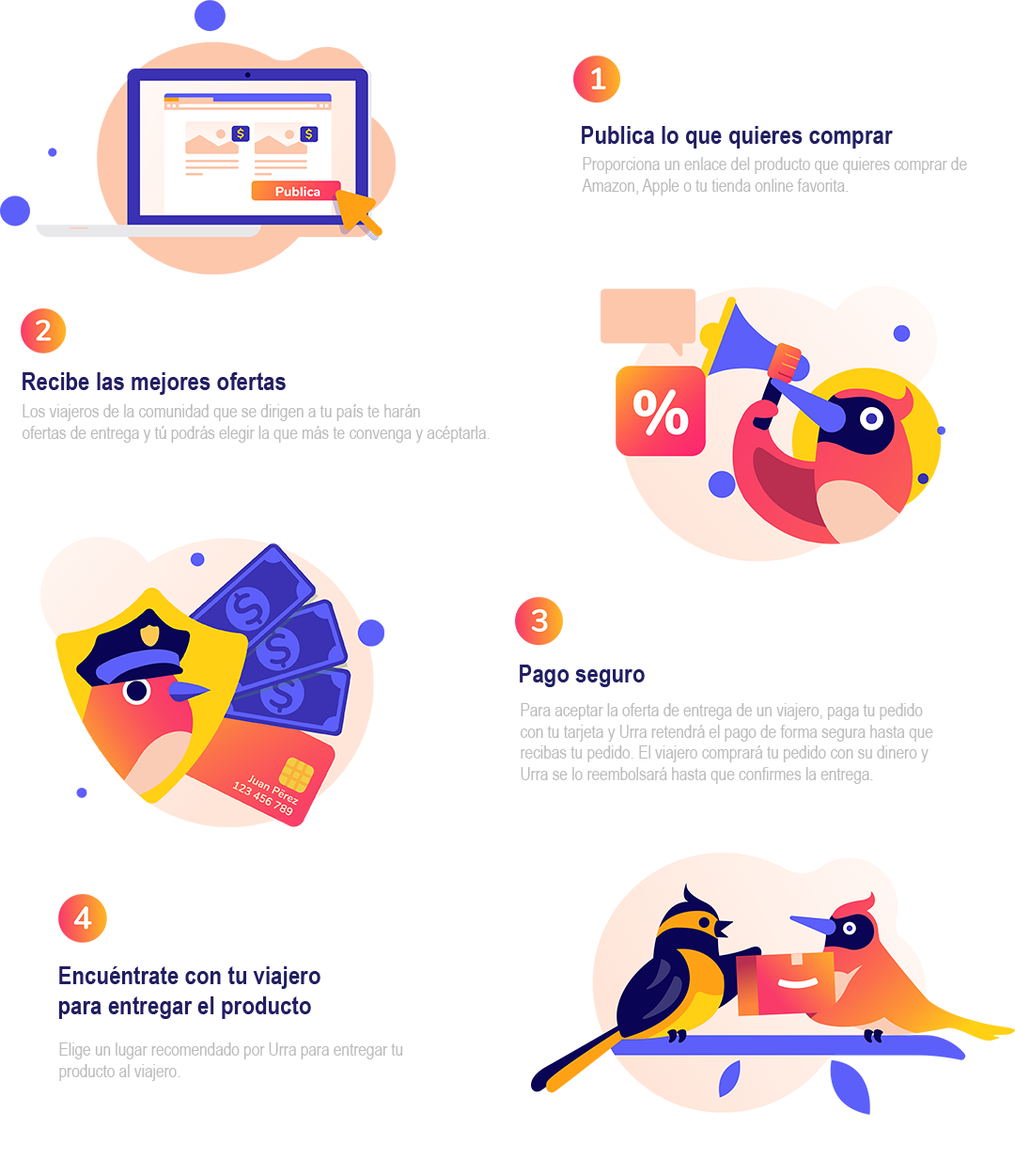
<style>
.page{position:relative;width:1015px;height:1175px;background:#ffffff}
.page>*{position:absolute;margin:0}
.t1{font:25.6px "ArialNarrow-Bold";color:#211e61}
.t2{font:17.6px "ArialNarrow";color:#bbbbbb}
</style>
<div class="page">
<p class="t1" style="left:582px;top:126px;width:311px;height:22px">Publica lo que quieres comprar</p>
<p class="t2" style="left:582px;top:157px;width:385px;height:38px">Proporciona un enlace del producto que quieres comprar de<br>Amazon, Apple o tu tienda online favorita.</p>
<p class="t1" style="left:23px;top:372px;width:263px;height:23px">Recibe las mejores ofertas</p>
<p class="t2" style="left:22px;top:404px;width:468px;height:39px">Los viajeros de la comunidad que se dirigen a tu país te harán<br>ofertas de entrega y tú podrás elegir la que más te convenga y acéptarla.</p>
<p class="t1" style="left:520px;top:664px;width:125px;height:23px">Pago seguro</p>
<p class="t2" style="left:521px;top:703px;width:412px;height:81px">Para aceptar la oferta de entrega de un viajero, paga tu pedido<br>con tu tarjeta y Urra retendrá el pago de forma segura hasta que<br>recibas tu pedido. El viajero comprará tu pedido con su dinero y<br>Urra se lo reembolsará hasta que confirmes la entrega.</p>
<p class="t1" style="left:58px;top:966px;width:262px;height:53px">Encuéntrate con tu viajero <br>para entregar el producto</p>
<p class="t2" style="left:59px;top:1042px;width:344px;height:39px">Elige un lugar recomendado por Urra para entregar tu<br>producto al viajero.</p>
</div>
